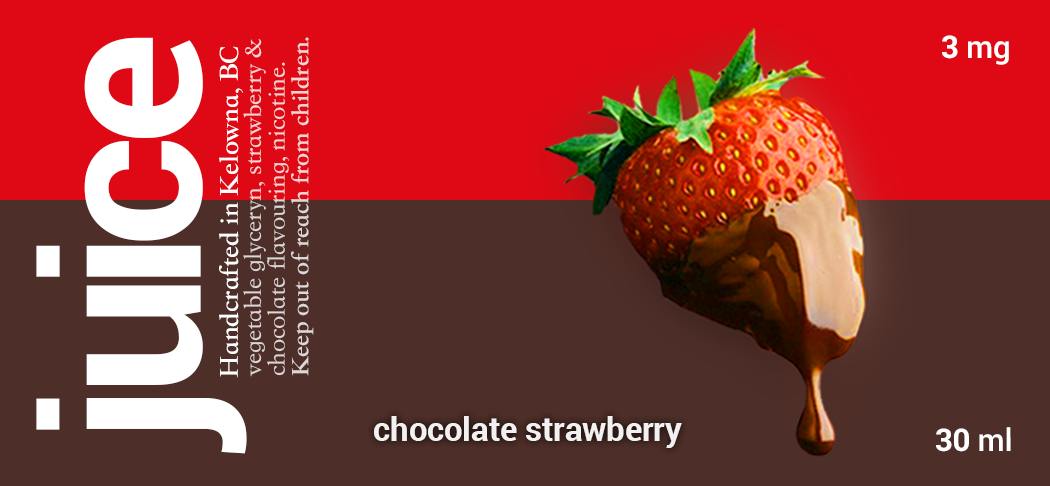
<style>
.page{position:relative;width:1050px;height:486px;background:#4e2e28}
.page>*{position:absolute;margin:0}
.t1{font:215.2px "Roboto-Bold";letter-spacing:-0.01em;color:#ffffff}
.t2{font:26.1px/23.8px "STSongti-TC-Regular";letter-spacing:-0.01em}
.t3{font:26.1px/23.8px "STSongti-TC-Bold";letter-spacing:-0.01em}
.t4{font:31.2px "Roboto-Medium";letter-spacing:-0.01em;color:#ffffff}
.t5{font:31.2px "Roboto-Bold";letter-spacing:-0.01em;color:#ffffff}
.t6{font:28.4px "STSongti-TC-Bold";letter-spacing:-0.01em;color:#ffffff}
.t7{font:33.2px "Roboto-Bold";letter-spacing:-0.01em;color:#ffffff}
</style>
<div class="page">
<p class="t1" style="left:36px;top:37px;width:211px;height:417px;rotate:-90deg">juice</p>
<p class="t2" style="left:243px;top:37px;width:71px;height:340px;rotate:-90deg">vegetable glyceryn, strawberry &amp;<br>chocolate flavouring, nicotine.<br><span class="t3">Keep out of reach from children.</span></p>
<p class="t4" style="left:942px;top:35px;width:67px;height:30px"><span class="t5">3 </span>mg</p>
<p class="t6" style="left:219px;top:46px;width:24px;height:332px;rotate:-90deg">Handcrafted in Kelowna, BC</p>
<p class="t7" style="left:374px;top:416px;width:308px;height:32px;opacity:0.9">chocolate strawberry</p>
<p class="t5" style="left:936px;top:427px;width:75px;height:25px">30 <span class="t4">ml</span></p>
</div>
